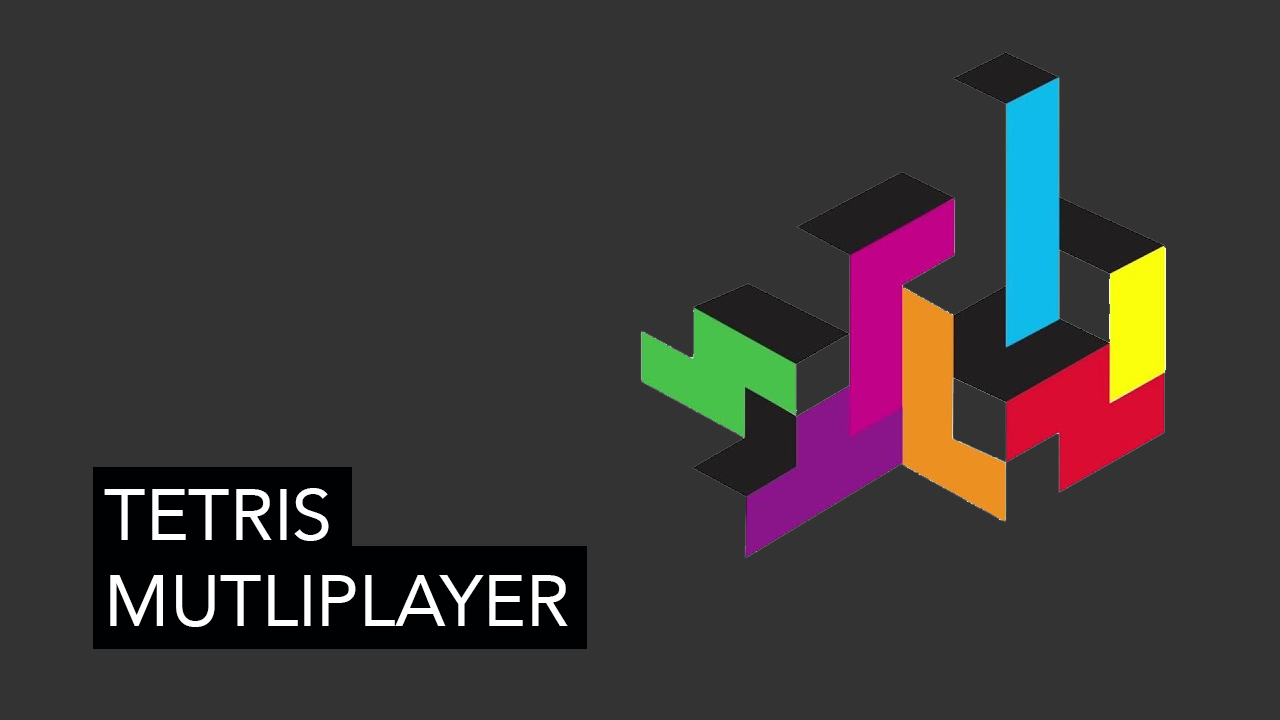
<style>
.page{position:relative;width:1280px;height:720px;background:#333333}
.page>*{position:absolute;margin:0}
.t1{font:72px "Avenir-Roman";color:#ffffff}
</style>
<div class="page">
<p class="t1" style="left:104px;top:488px;width:464px;height:139px">TETRIS<br>MUTLIPLAYER</p>
</div>
